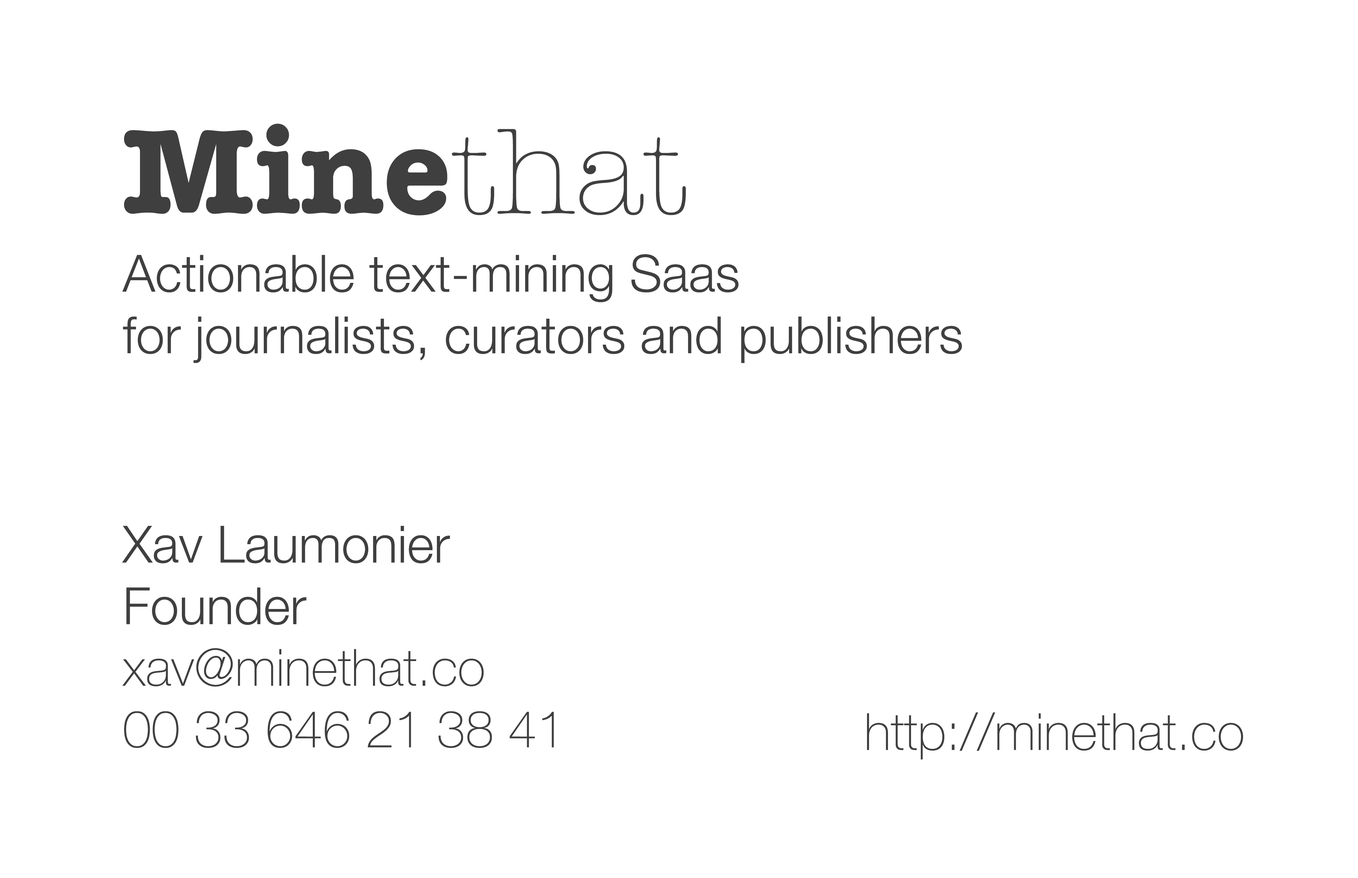
<style>
.page{position:relative;width:1358px;height:878px;background:#ffffff}
.page>*{position:absolute;margin:0}
.t1{font:123.8px "AmericanTypewriter-Bold";color:#3f3f3f}
.t2{font:123.8px "AmericanTypewriter-Light";color:#3f3f3f}
.t3{font:51.3px "HelveticaNeue-Light";color:#3f3f3f}
.t4{font:51.3px "HelveticaNeue-Thin";color:#3f3f3f}
</style>
<div class="page">
<p class="t1" style="left:124px;top:124px;width:562px;height:92px">Mine<span class="t2">that</span></p>
<p class="t3" style="left:122px;top:254px;width:840px;height:109px">Actionable text-mining Saas <br>for journalists, curators and publishers</p>
<p class="t4" style="left:122px;top:526px;width:432px;height:222px"><span class="t3">Xav Laumonier<br>Founder<br></span>xav@minethat.co<br>00 33 646 21 38 41</p>
<p class="t4" style="left:867px;top:713px;width:376px;height:47px">http://minethat.co</p>
</div>
